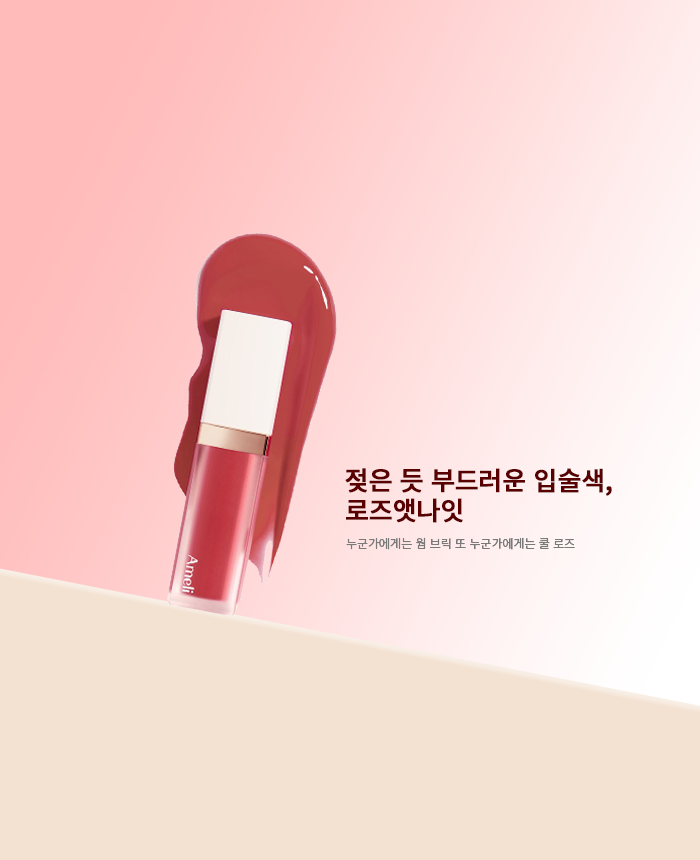
<style>
.page{position:relative;width:700px;height:860px;background:#f3e2d2}
.page>*{position:absolute;margin:0}
.t1{font:26px/30px "NotoSansKR-Medium";letter-spacing:-0.03em;color:#590000;font-weight:bold}
.t2{font:12px "NotoSansKR-Light";letter-spacing:-0.03em;color:#7a7a7a;font-weight:bold}
</style>
<div class="page">
<p class="t1" style="left:345px;top:468px;width:267px;height:55px">젖은 듯 부드러운 입술색,<br>로즈앳나잇</p>
<p class="t2" style="left:346px;top:537px;width:229px;height:13px">누군가에게는 웜 브릭 또 누군가에게는 쿨 로즈</p>
</div>
